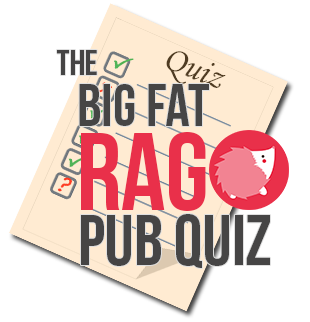
<style>
.page{position:relative;width:310px;height:322px;background:#ffffff}
.page>*{position:absolute;margin:0}
.t1{font:36px "BebasNeue";color:#464545}
.t2{font:60px "BebasNeue";color:#464545}
.t3{font:110px "BebasNeue";color:#e9304a}
.t4{font:72px "BebasNeue";color:#464545}
</style>
<div class="page">
<p class="t1" style="left:57px;top:50px;width:40px;height:25px">The</p>
<p class="t2" style="left:79px;top:84px;width:130px;height:42px">big fat</p>
<p class="t3" style="left:81px;top:132px;width:125px;height:79px">RAG</p>
<p class="t4" style="left:81px;top:214px;width:189px;height:54px">Pub Quiz</p>
</div>
